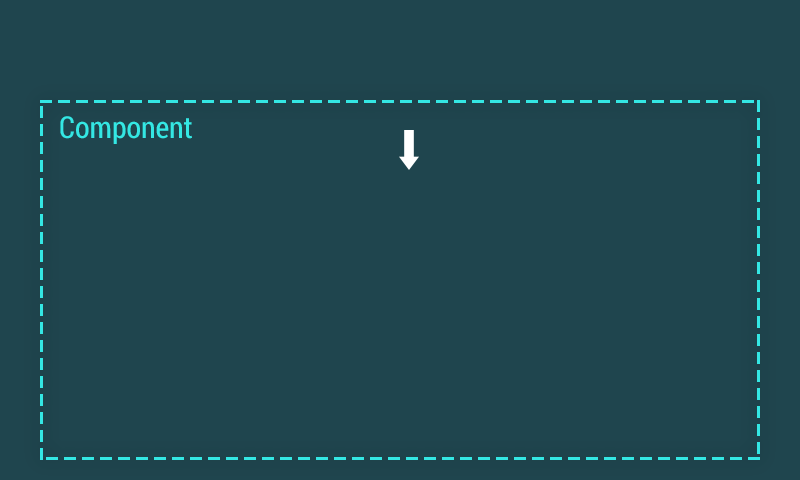
<style>
.page{position:relative;width:800px;height:480px;background:#1f454e}
.page>*{position:absolute;margin:0}
.t1{font:30px "RobotoCondensed-Regular";color:#34e7e4}
</style>
<div class="page">
<p class="t1" style="left:60px;top:116px;width:132px;height:28px">Component</p>
</div>
